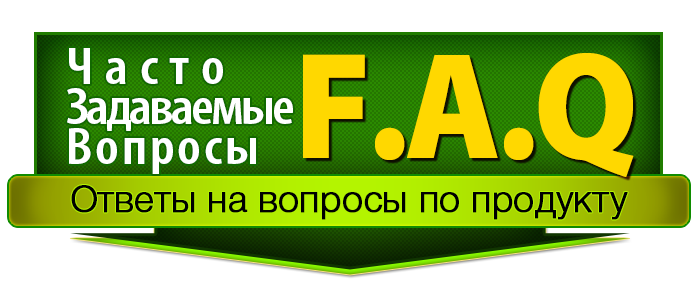
<style>
.page{position:relative;width:700px;height:300px;background:#ffffff}
.page>*{position:absolute;margin:0}
.t1{font:52.9px/40px "MyriadPro-SemiboldCond";letter-spacing:-0.05em;color:#ffffff;scale:1.1 1}
.t2{font:52.9px/40px "MyriadPro-SemiboldCond";letter-spacing:0.2em;color:#ffffff;scale:1.1 1}
.t3{font:52.9px/40px "MyriadPro-SemiboldCond";letter-spacing:0.05em;color:#ffffff;scale:1.1 1}
.t4{font:152.9px "MyriadPro-Black";letter-spacing:-0.025em;color:#ffd800;scale:0.93 1}
.t5{font:37.1px "Helvetica-4-Light";letter-spacing:-0.005em;color:#000000;font-weight:bold}
</style>
<div class="page">
<p class="t1" style="left:67px;top:48px;width:226px;height:126px"><span class="t2">Часто<br></span>Задаваемые<br><span class="t3">Вопросы</span></p>
<p class="t4" style="left:303px;top:53px;width:331px;height:124px">F.A.Q</p>
<p class="t5" style="left:71px;top:185px;width:557px;height:35px">Ответы на вопросы по продукту</p>
</div>
